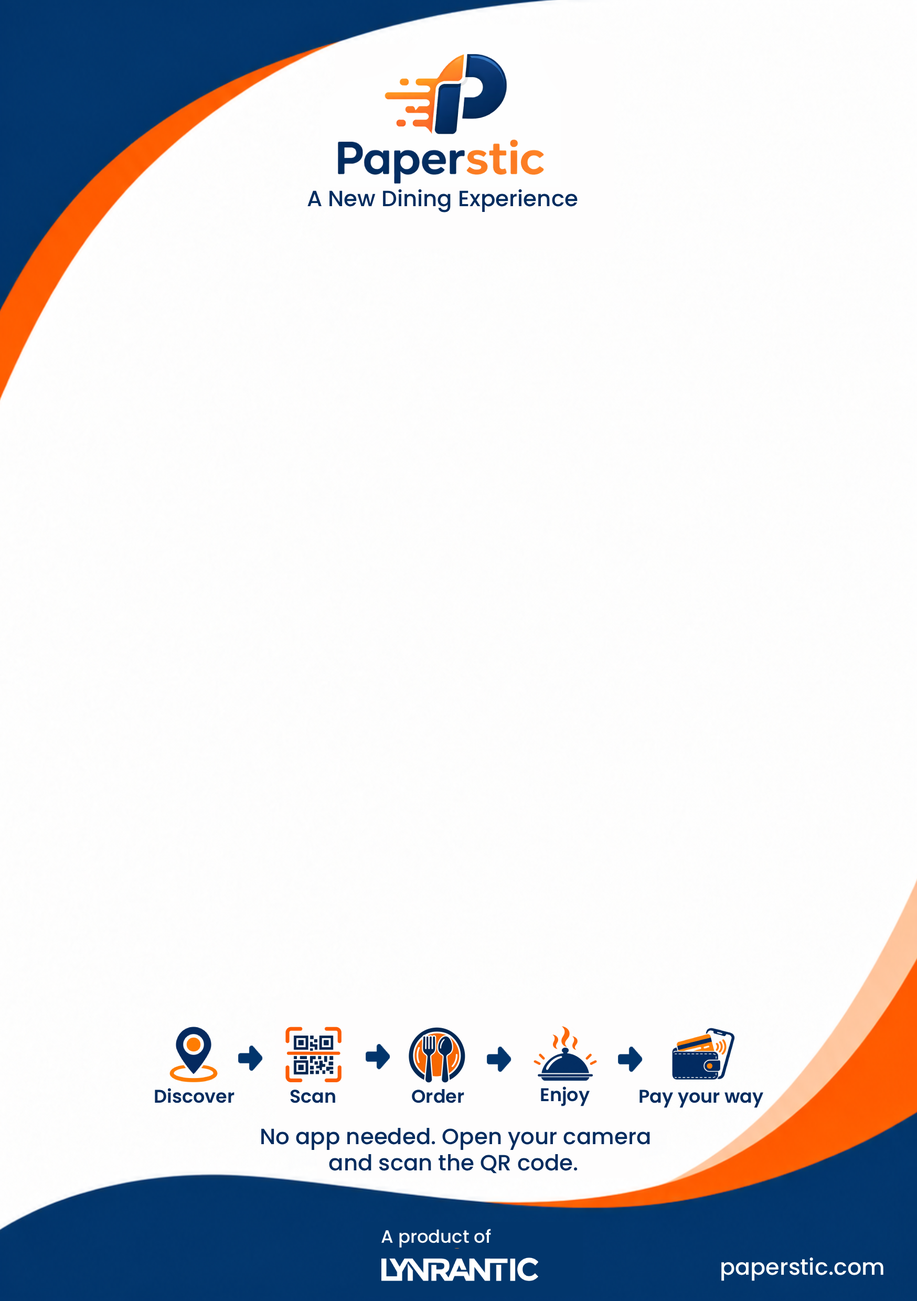
<style>
.page{position:relative;width:917px;height:1301px}
.page>*{position:absolute;margin:0}
.t1{font:22px "Poppins-Medium";color:#032c5f}
.t2{font:18.4px "Poppins-SemiBold";color:#032c5f}
.t3{font:17.8px "Poppins-Medium";color:#fdfefd}
.t4{font:22.6px "Poppins-Medium";color:#fdfefd}
</style>
<div class="page">
<p class="t1" style="left:307px;top:189px;width:270px;height:23px">A New Dining Experience</p>
<p class="t2" style="left:155px;top:1088px;width:79px;height:15px">Discover</p>
<p class="t2" style="left:290px;top:1089px;width:45px;height:14px">Scan</p>
<p class="t2" style="left:412px;top:1089px;width:52px;height:14px">Order</p>
<p class="t2" style="left:541px;top:1086px;width:49px;height:20px">Enjoy</p>
<p class="t2" style="left:639px;top:1089px;width:124px;height:19px">Pay your way</p>
<p class="t1" style="left:261px;top:1127px;width:389px;height:46px">No app needed. Open your camera<br>            and scan the QR code.</p>
<p class="t3" style="left:381px;top:1228px;width:110px;height:19px">A product of</p>
<p class="t4" style="left:721px;top:1257px;width:162px;height:24px">paperstic.com</p>
</div>
